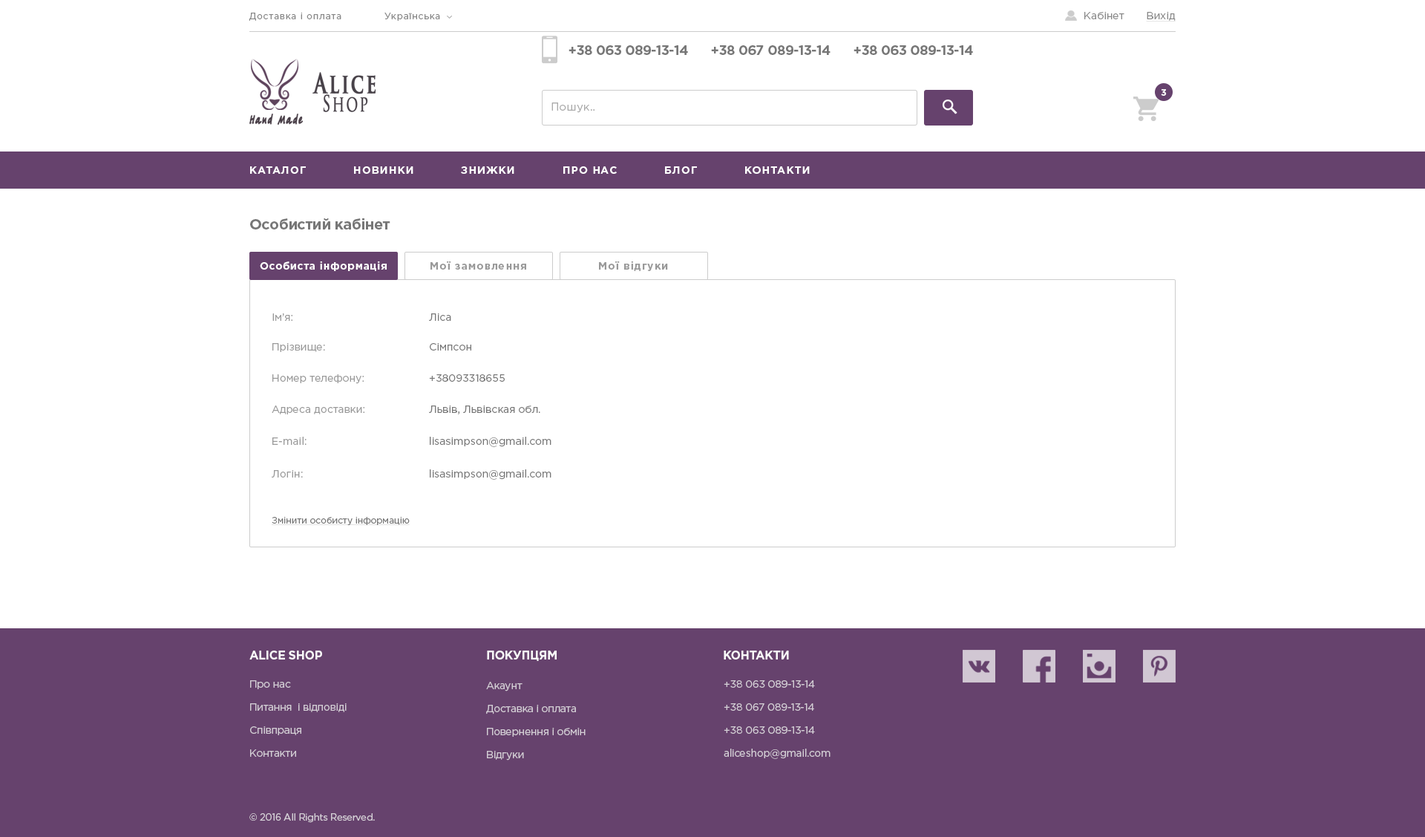
<style>
.page{position:relative;width:1425px;height:837px;background:#ffffff}
.page>*{position:absolute;margin:0}
.t1{font:8.9px "GothamPro";letter-spacing:0.075em;color:#888888}
.t2{font:10.4px "GothamPro";color:#888888}
.t3{font:10.4px "GothamPro";color:#888888;text-decoration:underline}
.t4{font:13.4px/18.6px "GothamPro-Bold";letter-spacing:-0.025em;color:#777777}
.t5{font:13.4px/18.6px "GothamPro";letter-spacing:-0.025em;color:#777777}
.t6{font:27.3px/18.2px "TrajanPro-Bold";letter-spacing:0.1em;color:#494249;font-weight:bold;scale:0.67 1}
.t7{font:21.9px/18.2px "TrajanPro-Regular";letter-spacing:0.1em;color:#494249;font-weight:bold;scale:0.67 1}
.t8{font:8.9px "GothamPro-Bold";letter-spacing:0.01em;color:#ffffff;text-transform:uppercase}
.t9{font:12.6px "TagirCTT";letter-spacing:0.1em;color:#463c45;font-weight:bold;scale:0.65 1}
.t10{font:11.1px "GothamPro";letter-spacing:0.01em;color:#aaaaaa}
.t11{font:10.4px "GothamPro-Bold";letter-spacing:0.075em;color:#ffffff;text-transform:uppercase}
.t12{font:14.8px "GothamPro-Bold";letter-spacing:-0.025em;color:#777777}
.t13{font:10.4px "GothamPro-Bold";letter-spacing:0.05em;color:#fffefe}
.t14{font:10.4px "GothamPro-Bold";letter-spacing:0.075em;color:#999999}
.t15{font:10.4px "GothamPro";color:#999999}
.t16{font:10.4px "GothamPro";color:#777777}
.t17{font:8.9px "GothamPro";color:#777777;text-decoration:underline}
.t18{font:11.9px "GothamPro-Bold";letter-spacing:-0.025em;color:#fafafa;text-transform:uppercase}
.t19{font:10.4px/15.6px "GothamPro";letter-spacing:-0.025em;color:#d4ced6}
.t20{font:9.7px "GothamPro";letter-spacing:-0.025em;color:#d4ced6}
</style>
<div class="page">
<p class="t1" style="left:249px;top:13px;width:92px;height:8px">Доставка і оплата</p>
<p class="t1" style="left:385px;top:13px;width:55px;height:8px">Українська</p>
<p class="t2" style="left:1085px;top:12px;width:40px;height:7px">Кабінет</p>
<p class="t3" style="left:1146px;top:12px;width:30px;height:10px">Вихід</p>
<p class="t4" style="left:569px;top:45px;width:119px;height:10px">+38 063 089-13-14<span class="t5"> <br>е</span></p>
<p class="t4" style="left:711px;top:45px;width:120px;height:10px">+38 067 089-13-14<span class="t5"> <br>е</span></p>
<p class="t4" style="left:854px;top:45px;width:119px;height:10px">+38 063 089-13-14<span class="t5"> <br>е</span></p>
<p class="t6" style="left:313px;top:72px;width:63px;height:40px">Alice<br> <span class="t7">Shop</span></p>
<p class="t8" style="left:1161px;top:89px;width:6px;height:7px">3</p>
<p class="t9" style="left:249px;top:114px;width:54px;height:11px">Hand Made</p>
<p class="t10" style="left:552px;top:102px;width:43px;height:11px">Пошук..</p>
<p class="t11" style="left:250px;top:166px;width:56px;height:8px">каталог</p>
<p class="t11" style="left:354px;top:166px;width:59px;height:8px">Новинки</p>
<p class="t11" style="left:461px;top:166px;width:53px;height:8px">Знижки</p>
<p class="t11" style="left:563px;top:166px;width:54px;height:8px">Про нас</p>
<p class="t11" style="left:665px;top:166px;width:32px;height:8px">Блог</p>
<p class="t11" style="left:745px;top:166px;width:65px;height:8px">Контакти</p>
<p class="t12" style="left:250px;top:218px;width:140px;height:11px">Особистий кабінет</p>
<p class="t13" style="left:260px;top:261px;width:127px;height:10px">Особиста інформація</p>
<p class="t14" style="left:431px;top:261px;width:95px;height:8px">Мої замовлення</p>
<p class="t14" style="left:599px;top:261px;width:69px;height:10px">Мої відгуки</p>
<p class="t15" style="left:272px;top:313px;width:20px;height:8px">Ім’я:</p>
<p class="t16" style="left:429px;top:313px;width:22px;height:8px">Ліса</p>
<p class="t15" style="left:272px;top:343px;width:53px;height:9px">Прізвище:</p>
<p class="t16" style="left:430px;top:343px;width:41px;height:7px">Сімпсон</p>
<p class="t15" style="left:272px;top:374px;width:92px;height:10px">Номер телефону:</p>
<p class="t16" style="left:429px;top:374px;width:76px;height:8px">+38093318655</p>
<p class="t15" style="left:272px;top:405px;width:92px;height:9px">Адреса доставки:</p>
<p class="t16" style="left:429px;top:405px;width:111px;height:9px">Львів, Львівская обл.</p>
<p class="t15" style="left:272px;top:436px;width:35px;height:9px">E-mail:</p>
<p class="t16" style="left:430px;top:436px;width:122px;height:11px">lisasimpson@gmail.com</p>
<p class="t15" style="left:272px;top:470px;width:31px;height:7px">Логін:</p>
<p class="t16" style="left:430px;top:469px;width:122px;height:11px">lisasimpson@gmail.com</p>
<p class="t17" style="left:272px;top:517px;width:138px;height:9px">Змінити особисту інформацію</p>
<p class="t18" style="left:249px;top:650px;width:73px;height:9px">Alice Shop</p>
<p class="t18" style="left:487px;top:650px;width:70px;height:11px">Покупцям</p>
<p class="t18" style="left:724px;top:650px;width:65px;height:9px">Контакти</p>
<p class="t19" style="left:250px;top:680px;width:97px;height:76px">Про нас<br>Питання  і відповіді<br>Співпраця<br>Контакти</p>
<p class="t19" style="left:486px;top:681px;width:100px;height:79px">Акаунт<br>Доставка і оплата<br>Повернення і обмін<br>Відгуки</p>
<p class="t19" style="left:724px;top:680px;width:107px;height:79px">+38 063 089-13-14 <br>+38 067 089-13-14 <br>+38 063 089-13-14 <br>aliceshop@gmail.com</p>
<p class="t20" style="left:249px;top:813px;width:126px;height:10px">© 2016 All Rights Reserved.</p>
</div>
